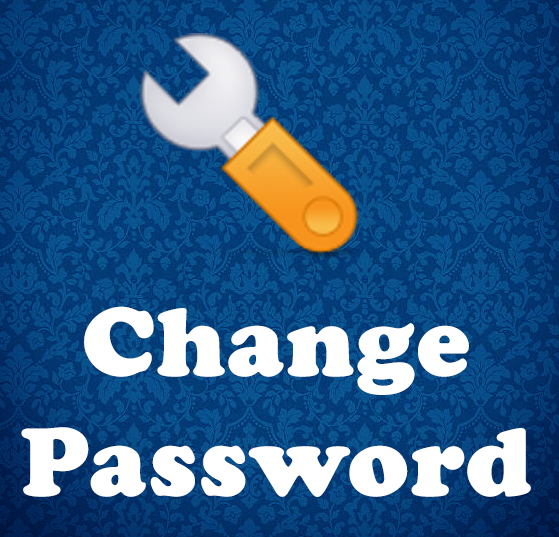
<style>
.page{position:relative;width:559px;height:537px}
.page>*{position:absolute;margin:0}
.t1{font:100px "CooperBlack";color:#ffffff;font-weight:bold}
</style>
<div class="page">
<p class="t1" style="left:21px;top:306px;width:510px;height:191px;text-align:center">Change<br>Password</p>
</div>
